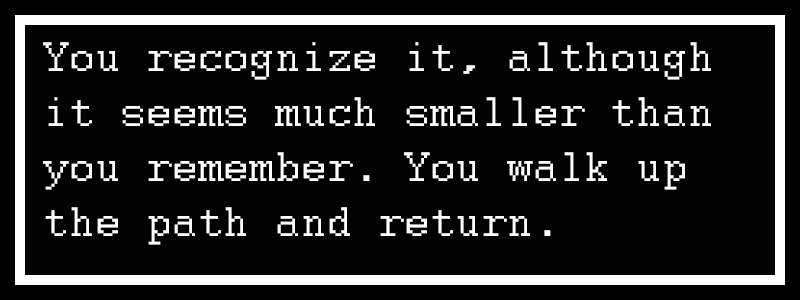
<style>
.page{position:relative;width:800px;height:300px;background:#010101}
.page>*{position:absolute;margin:0}
.t1{font:45.8px "Courier";color:#ffffff}
</style>
<div class="page">
<p class="t1" style="left:43px;top:42px;width:668px;height:203px">You recognize it, although<br>it seems much smaller than<br>you remember. You walk up<br>the path and return.</p>
</div>
